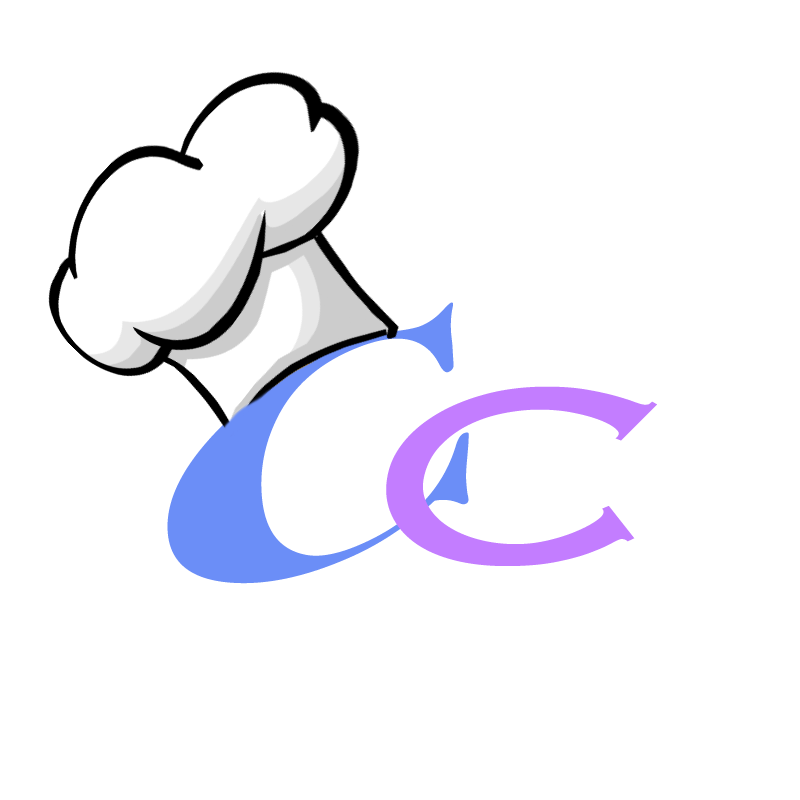
<style>
.page{position:relative;width:800px;height:800px;background:#ffffff}
.page>*{position:absolute;margin:0}
.t1{font:271.7px "BodoniSvtyTwoOSITCTT-Bold";letter-spacing:0.025em;color:#6b8ef7;font-style:italic;scale:2.11 1}
.t2{font:335.2px "Copperplate-Light";letter-spacing:0.025em;color:#c37dff;font-style:italic;scale:1.33 1}
</style>
<div class="page">
<p class="t1" style="left:167px;top:302px;width:302px;height:282px;rotate:-24deg">C</p>
<p class="t2" style="left:386px;top:386px;width:271px;height:180px">C</p>
</div>
